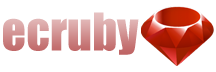
<style>
.page{position:relative;width:216px;height:72px;background:#ffffff}
.page>*{position:absolute;margin:0}
.t1{font:48px "Impact"}
</style>
<div class="page">
<p class="t1" style="left:3px;top:12px;width:136px;height:43px">ecruby</p>
</div>
